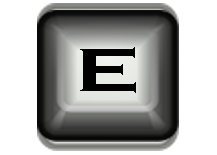
<style>
.page{position:relative;width:217px;height:155px;background:#ffffff}
.page>*{position:absolute;margin:0}
.t1{font:72.5px "CopperplateGothic-Bold";letter-spacing:0.08em;color:#000000;scale:1.18 1}
.t2{font:64.2px "CopperplateGothic-Bold";letter-spacing:0.08em;color:#000000;scale:1.33 1}
</style>
<div class="page">
<p class="t1" style="left:80px;top:46px;width:56px;height:52px">E</p>
<p class="t2" style="left:80px;top:47px;width:56px;height:46px">E</p>
</div>
